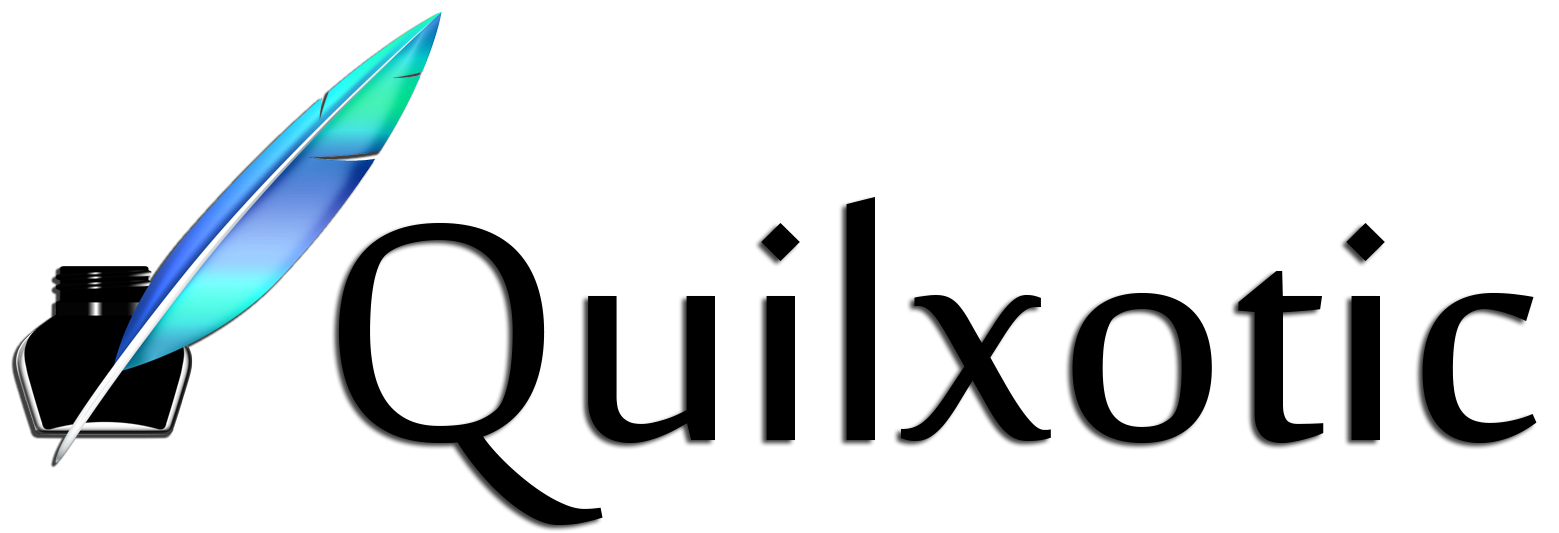
<style>
.page{position:relative;width:1559px;height:533px;background:#ffffff}
.page>*{position:absolute;margin:0}
.t1{font:430px "SakkalMajalla";color:#000000}
</style>
<div class="page">
<p class="t1" style="left:338px;top:197px;width:1199px;height:328px">Quilxotic</p>
</div>
